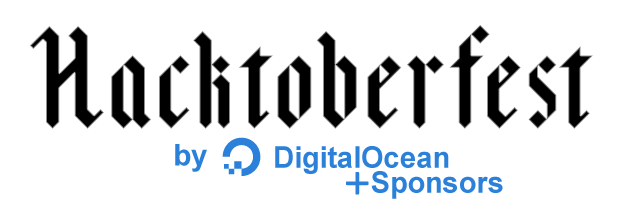
<style>
.page{position:relative;width:632px;height:213px;background:#ffffff}
.page>*{position:absolute;margin:0}
.t1{font:30px "Arial-BoldMT";color:#2b81d9}
.t2{font:30px "Arial-BoldMT";color:#2b81d9;scale:0.97 1}
</style>
<div class="page">
<p class="t1" style="left:175px;top:144px;width:32px;height:28px">by</p>
<p class="t2" style="left:275px;top:146px;width:174px;height:28px">DigitalOcean</p>
<p class="t2" style="left:371px;top:171px;width:132px;height:28px">Sponsors</p>
</div>
